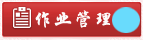
<style>
.page{position:relative;width:143px;height:40px}
.page>*{position:absolute;margin:0}
.t1{font:20px "STXingkai";color:#fcfafa}
</style>
<div class="page">
<p class="t1" style="left:35px;top:10px;width:76px;height:18px">作业管理</p>
</div>
